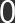
<style>
.page{position:relative;width:15px;height:23px;background:#333333}
.page>*{position:absolute;margin:0}
.t1{font:32px "LeelawadeeUI";color:#ffffff}
</style>
<div class="page">
<p class="t1" style="left:0px;top:0px;width:15px;height:23px">0</p>
</div>
